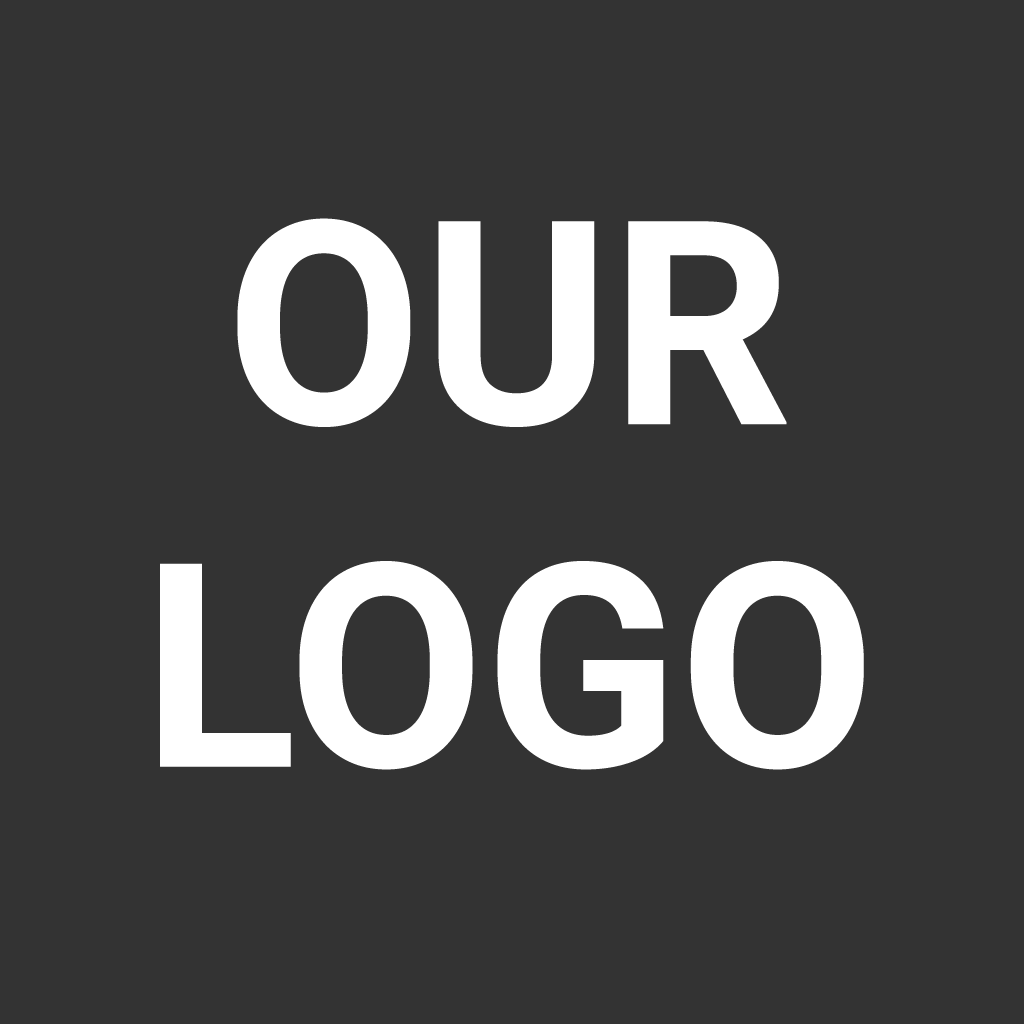
<style>
.page{position:relative;width:1024px;height:1024px;background:#333333}
.page>*{position:absolute;margin:0}
.t1{font:285.3px "Roboto-Bold";color:#ffffff}
</style>
<div class="page">
<p class="t1" style="left:160px;top:218px;width:704px;height:552px;text-align:center">OUR<br>LOGO</p>
</div>
